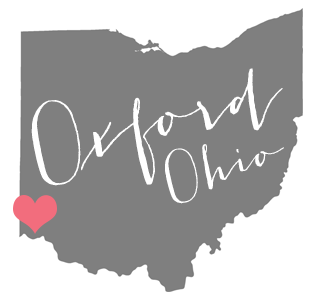
<style>
.page{position:relative;width:314px;height:302px;background:#7f7f7f}
.page>*{position:absolute;margin:0}
.t1{font:75px "JacquesGilles";letter-spacing:-0.01em;color:#ffffff;scale:0.96 1}
.t2{font:48px "JacquesGilles";letter-spacing:-0.01em;color:#ffffff}
</style>
<div class="page">
<p class="t1" style="left:31px;top:68px;width:252px;height:118px;rotate:-13deg">Oxford</p>
<p class="t2" style="left:165px;top:144px;width:119px;height:60px;rotate:-15deg">Ohio</p>
</div>
